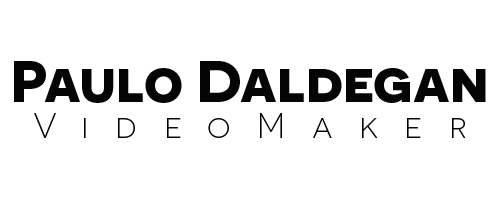
<style>
.page{position:relative;width:500px;height:198px;background:#ffffff}
.page>*{position:absolute;margin:0}
.t1{font:59px "Novecentosanswide-Bold";color:#050505}
.t2{font:35px "Novecentosanswide-Light";letter-spacing:0.76em;color:#050505}
</style>
<div class="page">
<p class="t1" style="left:14px;top:61px;width:472px;height:42px">Paulo Daldegan</p>
<p class="t2" style="left:34px;top:113px;width:432px;height:25px">VideoMaker</p>
</div>
